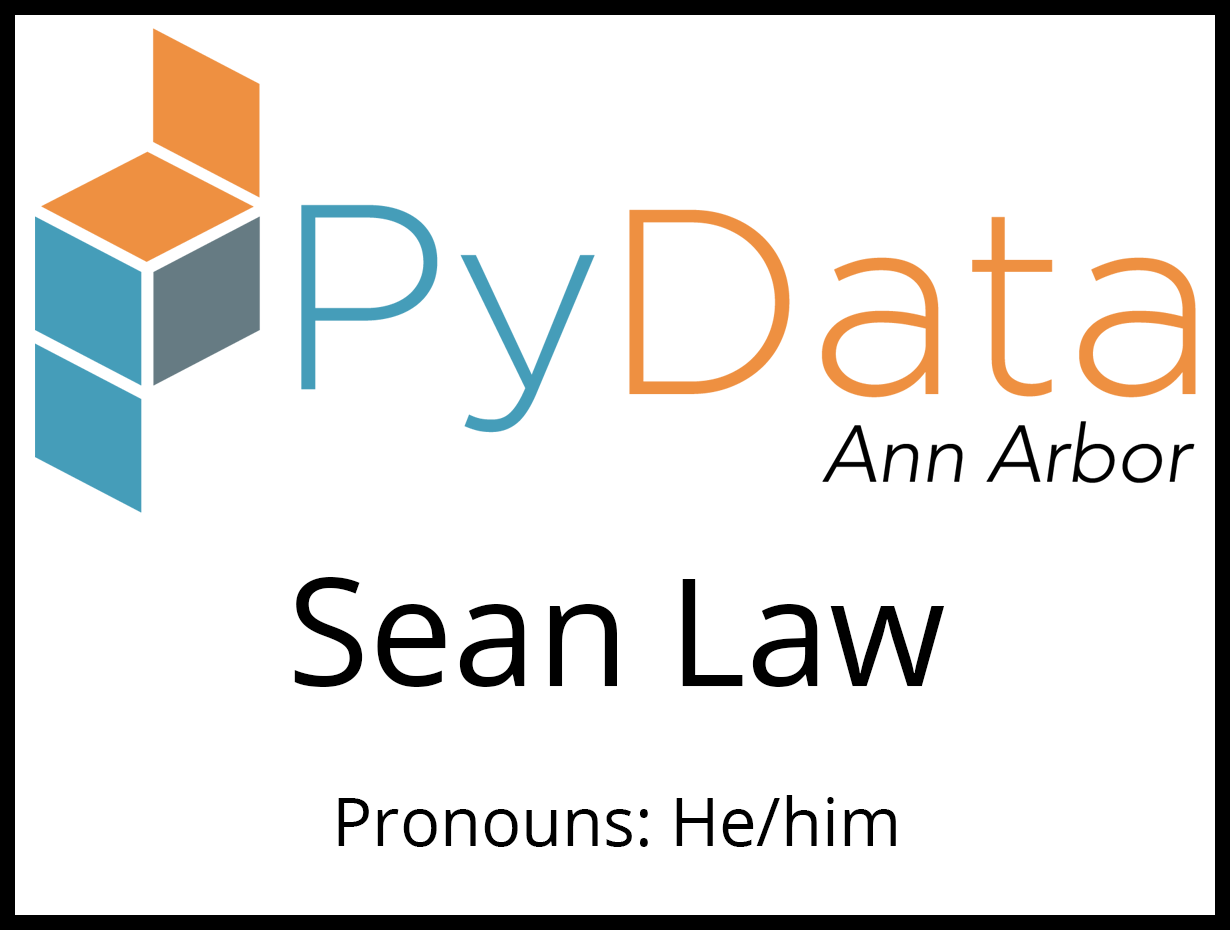
<style>
.page{position:relative;width:1230px;height:930px;background:#ffffff}
.page>*{position:absolute;margin:0}
.t1{font:66.7px "OpenSans-Regular";color:#000000}
.t2{font:150px "OpenSans-Regular";color:#000000}
</style>
<div class="page">
<p class="t1" style="left:294px;top:577px;width:651px;height:270px;text-align:center"><span class="t2">Sean Law<br></span><br>Pronouns: He/him</p>
</div>
